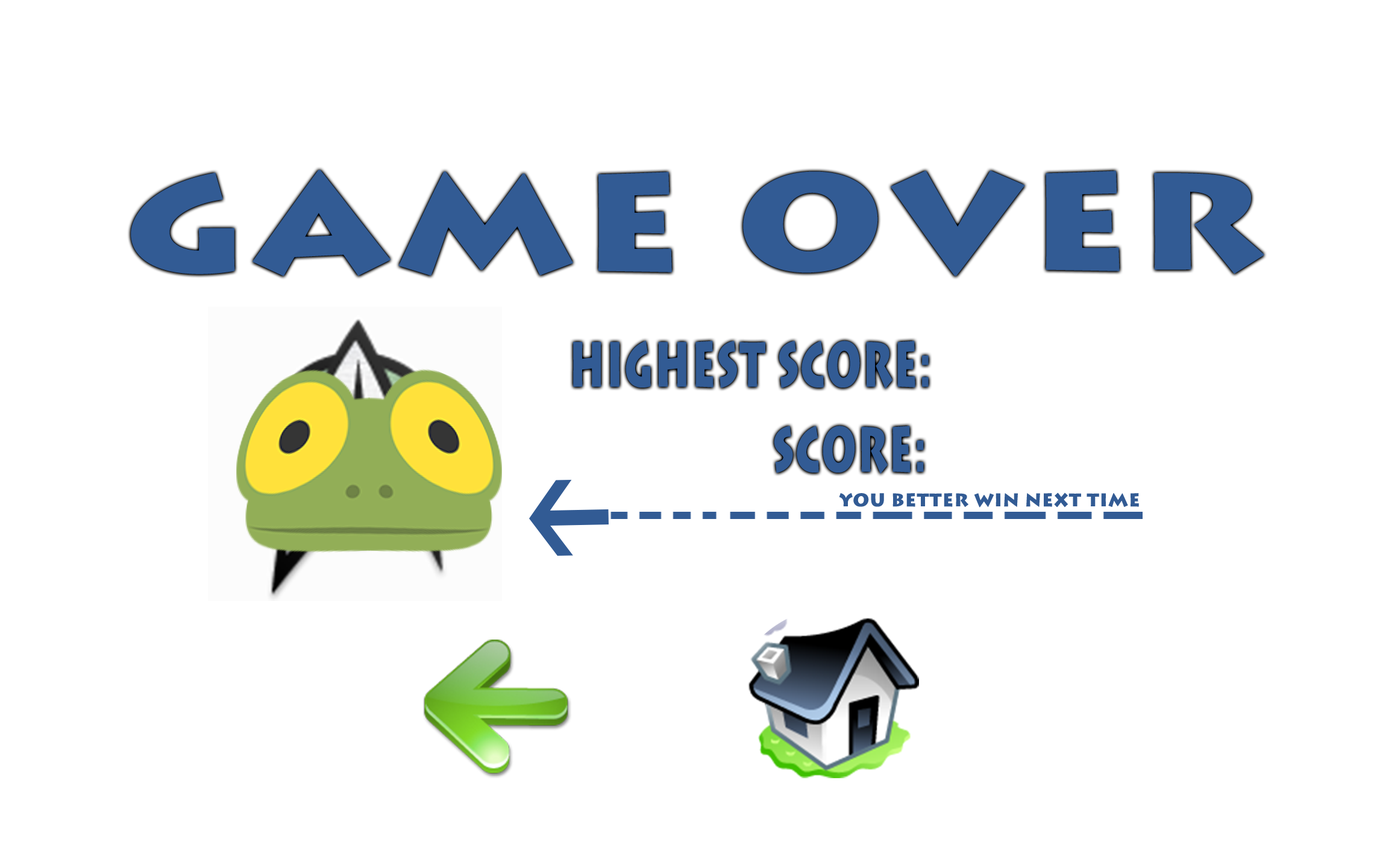
<style>
.page{position:relative;width:1374px;height:868px;background:#ffffff}
.page>*{position:absolute;margin:0}
.t1{font:135.9px "LithosPro-Black";letter-spacing:0.04em;color:#325b94;scale:1.2 1}
.t2{font:62.8px "LithosPro-Black";letter-spacing:0.04em;color:#325b94;scale:0.61 1}
.t3{font:18.1px "LithosPro-Black";letter-spacing:0.04em;color:#325b94}
</style>
<div class="page">
<p class="t1" style="left:131px;top:170px;width:1133px;height:106px">GAME OVER</p>
<p class="t2" style="left:573px;top:340px;width:356px;height:49px">HIGHEST SCORE:</p>
<p class="t2" style="left:774px;top:425px;width:150px;height:49px">SCORE:</p>
<p class="t3" style="left:839px;top:492px;width:300px;height:15px">YOU BETTER WIN NEXT TIME</p>
</div>
